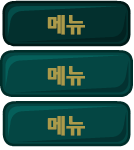
<style>
.page{position:relative;width:134px;height:150px;background:#044643}
.page>*{position:absolute;margin:0}
.t1{font:20px "NanumGothicExtraBold";color:#ab9a4a;font-weight:bold}
</style>
<div class="page">
<p class="t1" style="left:47px;top:15px;width:38px;height:20px">메뉴</p>
<p class="t1" style="left:47px;top:66px;width:38px;height:20px">메뉴</p>
<p class="t1" style="left:47px;top:116px;width:38px;height:20px">메뉴</p>
</div>
